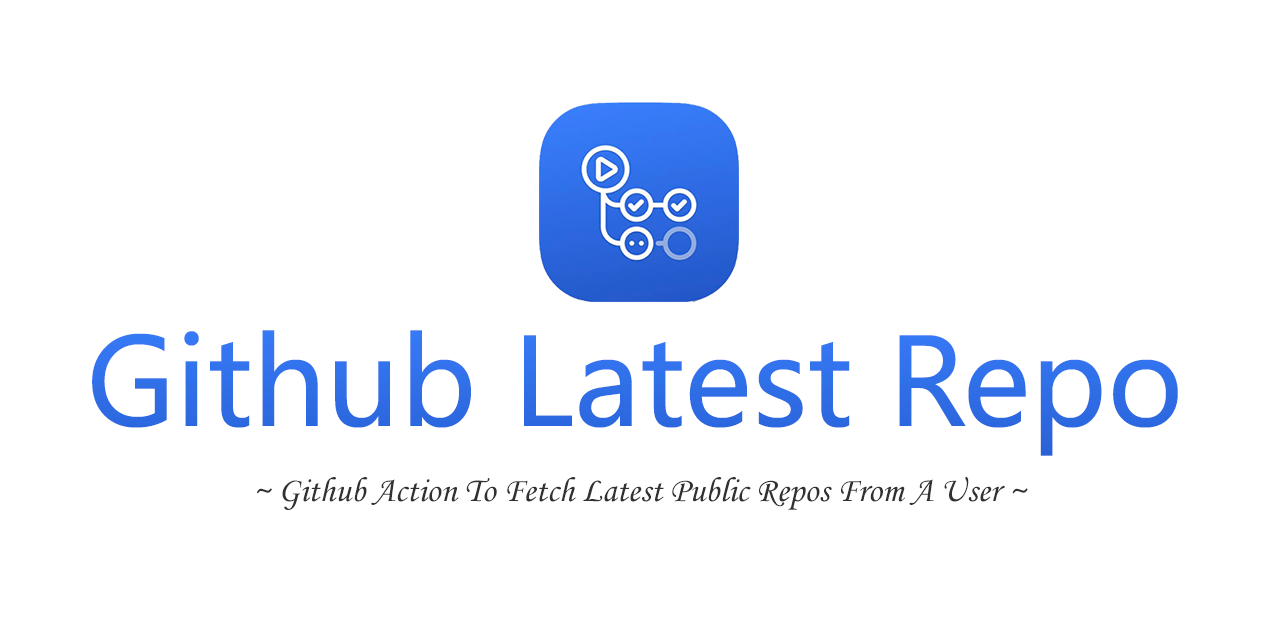
<style>
.page{position:relative;width:1280px;height:640px;background:#ffffff}
.page>*{position:absolute;margin:0}
.t1{font:120px "MicrosoftYaHeiUI";color:#306ee6}
.t2{font:35px "MonotypeCorsiva";color:#313131}
</style>
<div class="page">
<p class="t1" style="left:92px;top:330px;width:1086px;height:126px">Github Latest Repo</p>
<p class="t2" style="left:256px;top:477px;width:772px;height:33px">~ Github Action To Fetch Latest Public Repos From A User ~</p>
</div>
